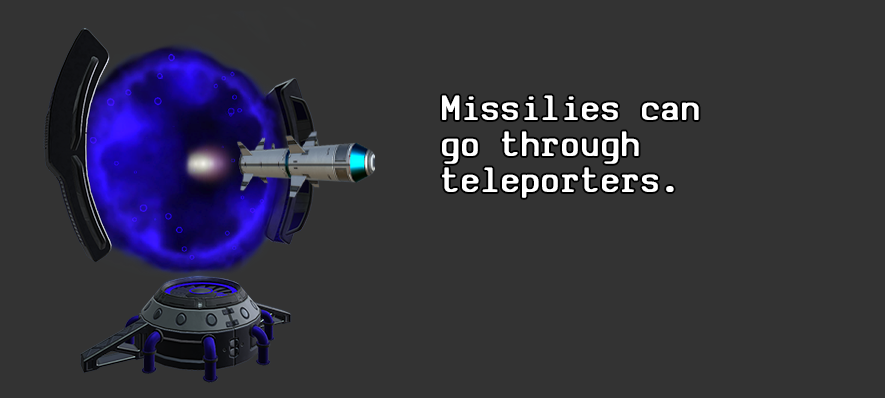
<style>
.page{position:relative;width:885px;height:398px;background:#333333}
.page>*{position:absolute;margin:0}
.t1{font:37.8px/36px "SVBasicManual-Bold";letter-spacing:0.05em;color:#ffffff;scale:0.95 1}
</style>
<div class="page">
<p class="t1" style="left:442px;top:95px;width:257px;height:103px">Missilies can<br>go through<br>teleporters.</p>
</div>
